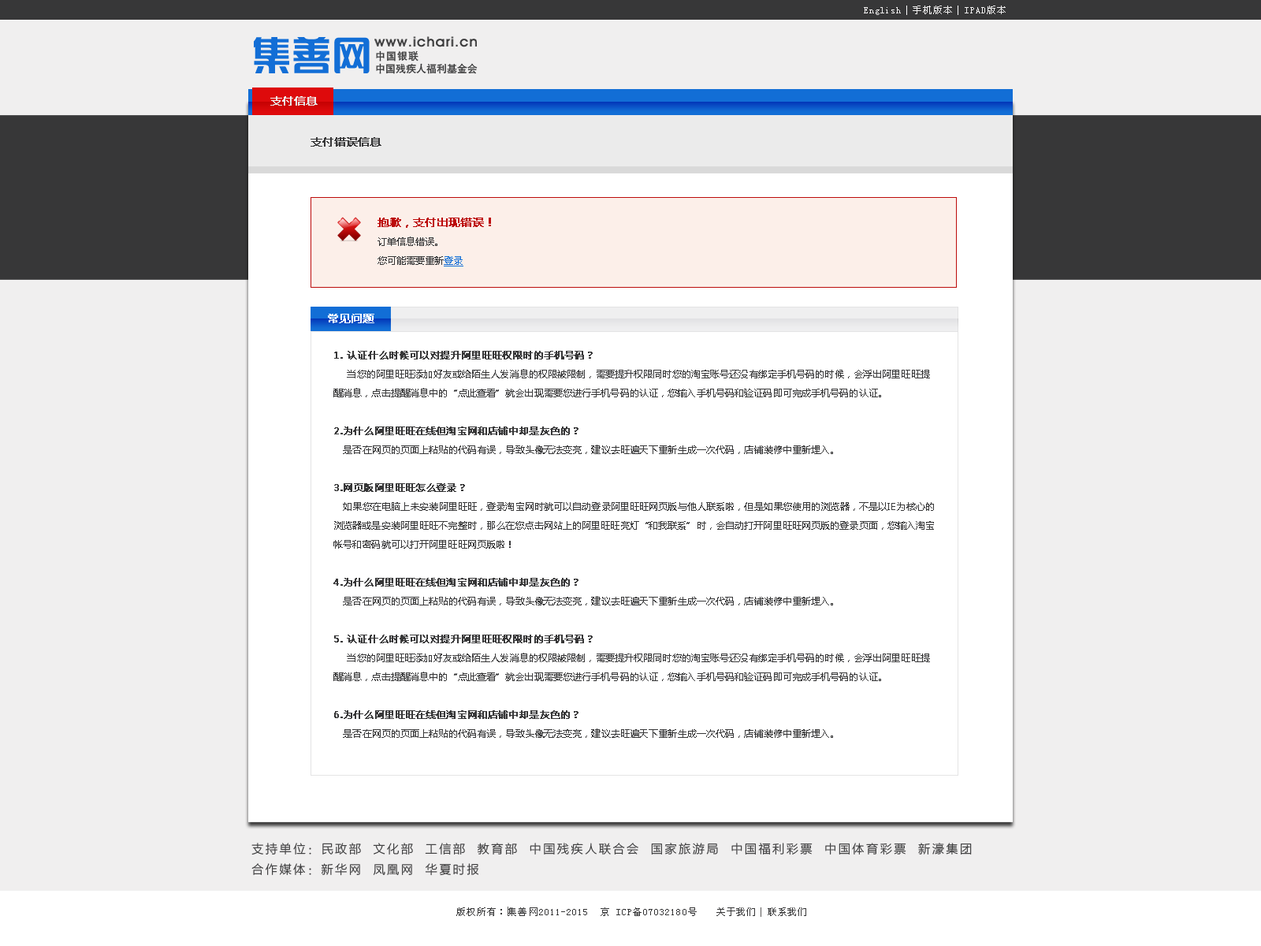
<style>
.page{position:relative;width:1261px;height:946px;background:#f0efef}
.page>*{position:absolute;margin:0}
.t1{font:9.5px "SimSun";letter-spacing:0.09em;color:#f0efef}
.t2{font:9.5px "SimSun";letter-spacing:0.07em;color:#f0efef}
.t3{font:10.2px "HeitiCSEG-Medium-GB";letter-spacing:0.08em;color:#373738}
.t4{font:10.2px "HeitiCSEG-Medium-GB";color:#373738}
.t5{font:11px "MicrosoftYaHei";color:#f0efef;font-weight:bold}
.t6{font:11px "MicrosoftYaHei";color:#373738;font-weight:bold}
.t7{font:9.5px/18.9px "MicrosoftYaHei";color:#373738}
.t8{font:11px/18.9px "MicrosoftYaHei";color:#bc0a0a;font-weight:bold}
.t9{font:9.5px/18.9px "MicrosoftYaHei";color:#126ed6;text-decoration:underline}
.t10{font:11px "MicrosoftYaHei";letter-spacing:0.01em;color:#ffffff;font-weight:bold}
.t11{font:9.5px/18.9px "MicrosoftYaHei";letter-spacing:0.01em;color:#373738}
.t12{font:9.5px/18.9px "MicrosoftYaHei";letter-spacing:0.01em;color:#373738;font-weight:bold}
.t13{font:12.1px/20.3px "FZLTXHK--GBK1-0";letter-spacing:0.15em;color:#373738}
.t14{font:9.5px "SimSun";letter-spacing:0.09em;color:#373738}
.t15{font:9.5px "SimSun";letter-spacing:0.07em;color:#373738}
</style>
<div class="page">
<p class="t1" style="left:864px;top:6px;width:142px;height:9px"><span class="t2">English  </span>手机版本  IPAD版本</p>
<p class="t3" style="left:376px;top:50px;width:42px;height:11px">中国银联</p>
<p class="t4" style="left:376px;top:63px;width:102px;height:11px">中国残疾人福利基金会</p>
<p class="t5" style="left:270px;top:96px;width:48px;height:10px">支付信息</p>
<p class="t6" style="left:311px;top:137px;width:70px;height:10px">支付错误信息</p>
<p class="t7" style="left:377px;top:218px;width:114px;height:48px"><span class="t8">抱歉，支付出现错误！<br></span>订单信息错误。<br>您可能需要重新<span class="t9">登录</span></p>
<p class="t10" style="left:328px;top:314px;width:46px;height:9px">常见问题</p>
<p class="t11" style="left:333px;top:351px;width:601px;height:387px"><span class="t12">1. 认证什么时候可以对提升阿里旺旺权限时的手机号码？<br> </span>   当您的阿里旺旺添加好友或给陌生人发消息的权限被限制，需要提升权限同时您的淘宝账号还没有绑定手机号码的时候，会浮出阿里旺旺提醒消息，点击提醒消息中的“点此查看”就会出现需要您进行手机号码的认证，您输入手机号码和验证码即可完成手机号码的认证。<br><br><span class="t12">2.为什么阿里旺旺在线但淘宝网和店铺中却是灰色的？<br></span>   是否在网页的页面上粘贴的代码有误，导致头像无法变亮，建议去旺遍天下重新生成一次代码，店铺装修中重新埋入。<br><br><span class="t12">3.网页版阿里旺旺怎么登录？<br></span>   如果您在电脑上未安装阿里旺旺，登录淘宝网时就可以自动登录阿里旺旺网页版与他人联系啦，但是如果您使用的浏览器，不是以IE为核心的浏览器或是安装阿里旺旺不完整时，那么在您点击网站上的阿里旺旺亮灯“和我联系”时，会自动打开阿里旺旺网页版的登录页面，您输入淘宝帐号和密码就可以打开阿里旺旺网页版啦！<br><br><span class="t12">4.为什么阿里旺旺在线但淘宝网和店铺中却是灰色的？<br></span>   是否在网页的页面上粘贴的代码有误，导致头像无法变亮，建议去旺遍天下重新生成一次代码，店铺装修中重新埋入。<br><br><span class="t12">5. 认证什么时候可以对提升阿里旺旺权限时的手机号码？<br> </span>   当您的阿里旺旺添加好友或给陌生人发消息的权限被限制，需要提升权限同时您的淘宝账号还没有绑定手机号码的时候，会浮出阿里旺旺提醒消息，点击提醒消息中的“点此查看”就会出现需要您进行手机号码的认证，您输入手机号码和验证码即可完成手机号码的认证。<br><br><span class="t12">6.为什么阿里旺旺在线但淘宝网和店铺中却是灰色的？<br></span>   是否在网页的页面上粘贴的代码有误，导致头像无法变亮，建议去旺遍天下重新生成一次代码，店铺装修中重新埋入。<br><br><span class="t12">3.网页版阿里旺旺怎么登录？<br></span>   如果您在电脑上未安装阿里旺旺，登录淘宝网时就可以自动登录阿里旺旺网页版与他人联系啦，但是如果您使用的浏览器，不是以IE为核心的浏览器或是安装阿里旺旺不完整时，那么在您点击网站上的阿里旺旺亮灯“和我联系”时，会自动打开阿里旺旺网页版的登录页面，您输入淘宝帐号和密码就可以打开阿里旺旺网页版啦！<br><br><span class="t12">4.为什么阿里旺旺在线但淘宝网和店铺中却是灰色的？<br></span>   是否在网页的页面上粘贴的代码有误，导致头像无法变亮，建议去旺遍天下重新生成一次代码，店铺装修中重新埋入。</p>
<p class="t13" style="left:251px;top:842px;width:721px;height:34px">支持单位：民政部  文化部  工信部  教育部  中国残疾人联合会  国家旅游局  中国福利彩票  中国体育彩票  新濠集团  <br>合作媒体：新华网  凤凰网  华夏时报</p>
<p class="t14" style="left:456px;top:907px;width:241px;height:9px">版权所有：集善网2011-2015  京 ICP备07032180号</p>
<p class="t15" style="left:716px;top:907px;width:90px;height:9px">关于我们  联系我们</p>
</div>
